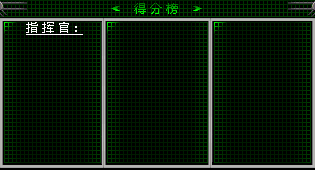
<style>
.page{position:relative;width:315px;height:170px;background:#000000}
.page>*{position:absolute;margin:0}
.t1{font:12px "MicrosoftYaHei"}
.t2{font:12px "MicrosoftYaHei";color:#ffffff;text-decoration:underline}
</style>
<div class="page">
<p class="t1" style="left:134px;top:3px;width:44px;height:11px">得 分 榜</p>
<p class="t2" style="left:26px;top:22px;width:57px;height:13px">指 挥 官：</p>
</div>
